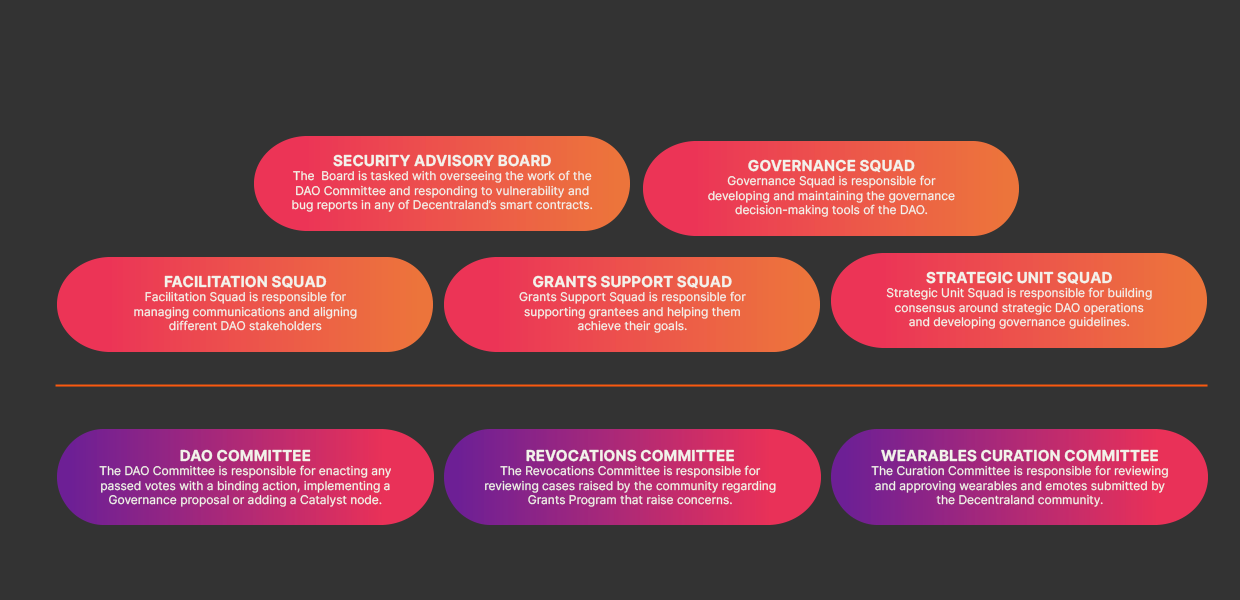
<style>
.page{position:relative;width:1240px;height:600px;background:#333333}
.page>*{position:absolute;margin:0}
.t1{font:12px "Inter-Regular";color:#f3f2eb}
.t2{font:15px "Inter-Bold";color:#f3f2eb;text-transform:uppercase}
</style>
<div class="page">
<p class="t1" style="left:292px;top:154px;width:301px;height:58px;text-align:center"><span class="t2">Security Advisory Board<br></span>The  Board is tasked with overseeing the work of the DAO Committee and responding to vulnerability and bug reports in any of Decentraland’s smart contracts.</p>
<p class="t1" style="left:708px;top:159px;width:247px;height:58px;text-align:center"><span class="t2">Governance Squad<br></span>Governance Squad is responsible for developing and maintaining the governance decision-making tools of the DAO.</p>
<p class="t1" style="left:134px;top:275px;width:223px;height:56px;text-align:center"><span class="t2">Facilitation Squad<br></span>Facilitation Squad is responsible for managing communications and aligning different DAO stakeholders</p>
<p class="t1" style="left:519px;top:275px;width:227px;height:58px;text-align:center"><span class="t2">Grants Support Squad<br></span>Grants Support Squad is responsible for supporting grantees and helping them achieve their goals.</p>
<p class="t1" style="left:886px;top:271px;width:266px;height:58px;text-align:center"><span class="t2">Strategic Unit Squad<br></span>Strategic Unit Squad is responsible for building consensus around strategic DAO operations and developing governance guidelines.</p>
<p class="t1" style="left:99px;top:449px;width:292px;height:58px;text-align:center"><span class="t2">DAO Committee<br></span>The DAO Committee is responsible for enacting any passed votes with a binding action, implementing a Governance proposal or adding a Catalyst node.</p>
<p class="t1" style="left:485px;top:449px;width:291px;height:58px;text-align:center"><span class="t2">Revocations Committee<br></span>The Revocations Committee is responsible for reviewing cases raised by the community regarding Grants Program that raise concerns.</p>
<p class="t1" style="left:871px;top:449px;width:297px;height:58px;text-align:center"><span class="t2">Wearables Curation Committee<br></span>The Curation Committee is responsible for reviewing and approving wearables and emotes submitted by the Decentraland community.</p>
</div>
